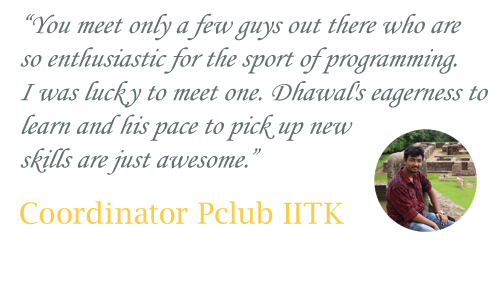
<style>
.page{position:relative;width:500px;height:302px;background:#ffffff}
.page>*{position:absolute;margin:0}
.t1{font:28px "MonotypeCorsiva";letter-spacing:0.005em;color:#647072;font-style:italic}
.t2{font:29px "LucidaBright";letter-spacing:0.005em;color:#f9cc4a}
</style>
<div class="page">
<p class="t1" style="left:20px;top:13px;width:468px;height:212px">“You meet only a few guys out there who are <br>so enthusiastic for the sport of programming. <br>I was lucky to meet one. Dhawal's eagerness to <br>learn and his pace to pick up new <br>skills are just awesome.”<br><br><br><span class="t2">Coordinator Pclub IITK</span></p>
</div>
